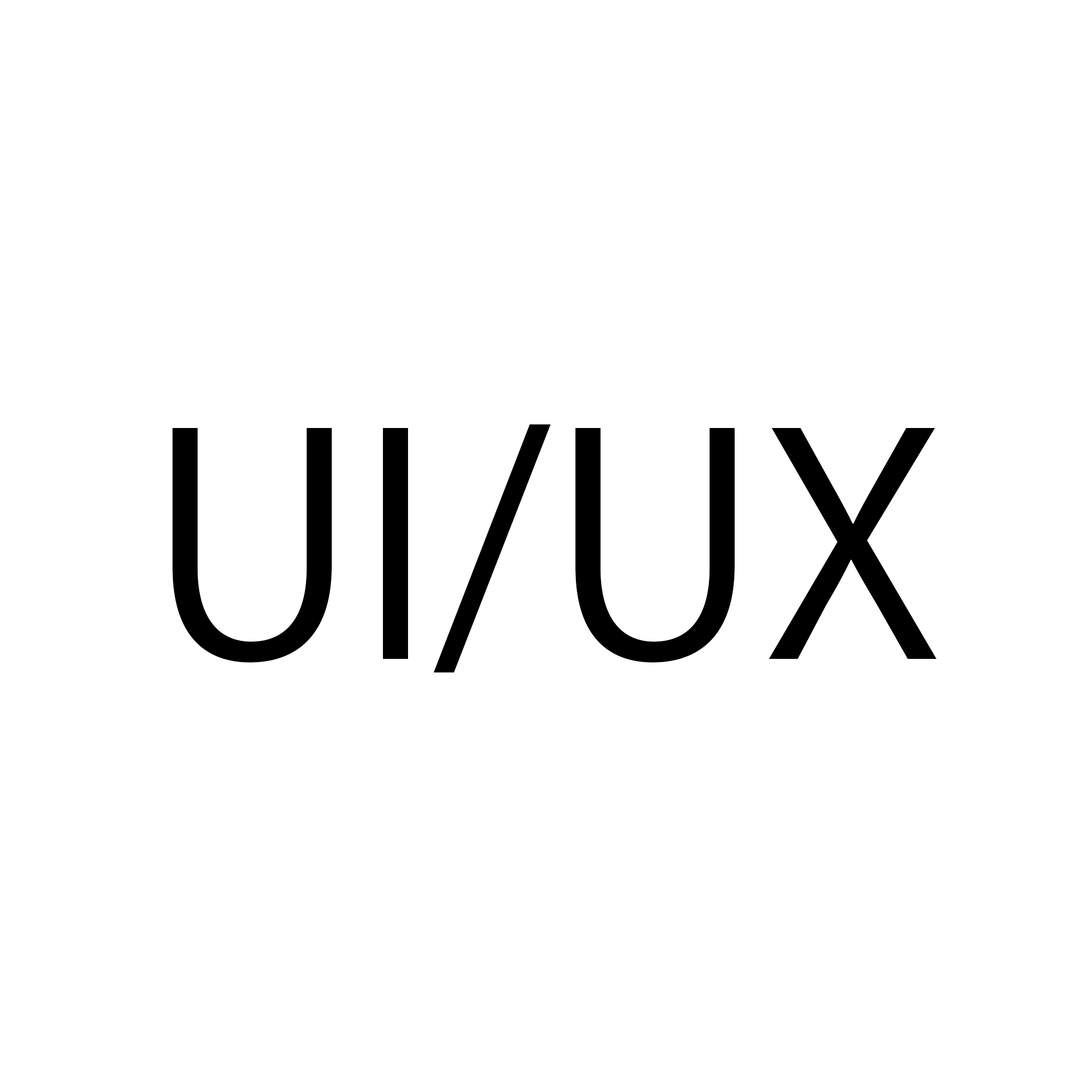
<style>
.page{position:relative;width:1092px;height:1092px;background:#ffffff}
.page>*{position:absolute;margin:0}
.t1{font:302.9px "KozGoPr6N-Regular";color:#000000}
.t2{font:153.6px "KozGoPr6N-Regular";color:#000000}
</style>
<div class="page">
<p class="t1" style="left:173px;top:424px;width:764px;height:249px;text-align:center">UI/UX<br><span class="t2"><br>UI/UX</span></p>
</div>
